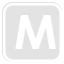
<style>
.page{position:relative;width:64px;height:64px;background:#e3e3e3}
.page>*{position:absolute;margin:0}
.t1{font:48px "CenturyGothic-Bold";color:#ffffff}
</style>
<div class="page">
<p class="t1" style="left:15px;top:15px;width:41px;height:34px">M</p>
</div>
